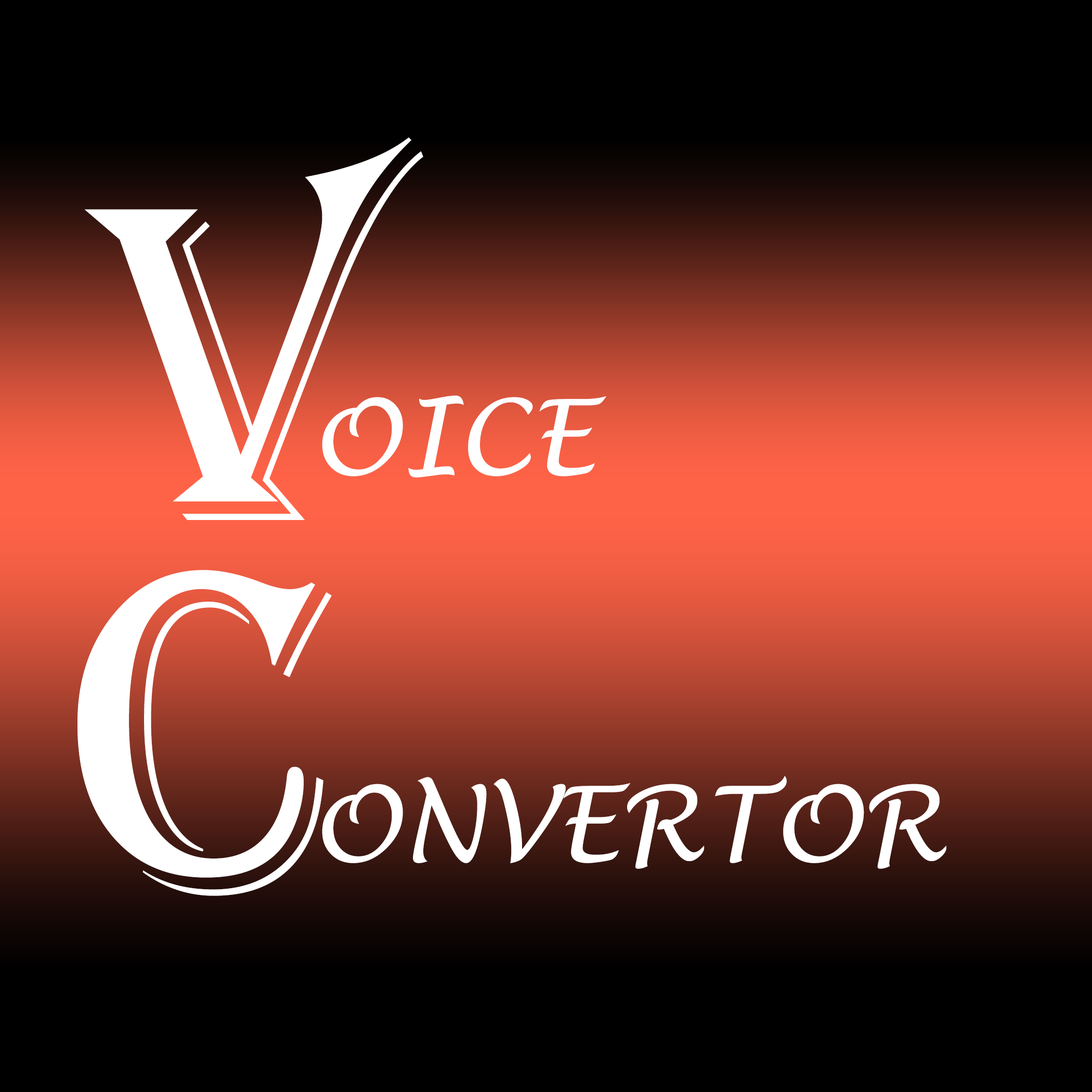
<style>
.page{position:relative;width:1092px;height:1092px;background:#000000}
.page>*{position:absolute;margin:0}
.t1{font:465.9px "Algerian";color:#ffffff}
.t2{font:104px "LucidaHandwriting-Italic";color:#fefefe}
.t3{font:104px "LucidaHandwriting-Italic";color:#ffffff}
</style>
<div class="page">
<p class="t1" style="left:85px;top:137px;width:338px;height:383px">V</p>
<p class="t2" style="left:322px;top:395px;width:284px;height:83px">OICE</p>
<p class="t1" style="left:77px;top:570px;width:255px;height:326px">C</p>
<p class="t3" style="left:322px;top:776px;width:624px;height:93px">ONVERTOR</p>
</div>
